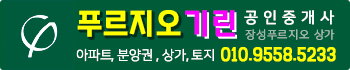
<style>
.page{position:relative;width:350px;height:70px;background:#005b38}
.page>*{position:absolute;margin:0}
.t1{font:30px "NIXGONB-Vb";letter-spacing:-0.025em;color:#ffff00;font-weight:bold}
.t2{font:30px "NIXGONB-Vb";letter-spacing:-0.025em;color:#fc00ff;font-weight:bold}
.t3{font:15px "NanumSquareOTFR";letter-spacing:0.34em;color:#ffffff;font-weight:bold}
.t4{font:11px "NanumSquareOTFL";letter-spacing:0.05em;color:#a3b9af;font-weight:bold}
.t5{font:13px "NanumSquareOTFL";letter-spacing:-0.025em;color:#ffffff;font-weight:bold}
.t6{font:14px "YANGJIN";letter-spacing:-0.025em;color:#ffff00;font-weight:bold}
</style>
<div class="page">
<p class="t1" style="left:77px;top:10px;width:104px;height:27px">푸르지오</p>
<p class="t2" style="left:185px;top:10px;width:50px;height:27px">기린</p>
<p class="t3" style="left:244px;top:10px;width:91px;height:15px">공인중개사</p>
<p class="t4" style="left:245px;top:29px;width:90px;height:11px">장성푸르지오 상가</p>
<p class="t5" style="left:76px;top:48px;width:138px;height:14px">아파트, 분양권 , 상가, 토지</p>
<p class="t6" style="left:221px;top:47px;width:115px;height:15px">010.9558.5233</p>
</div>
